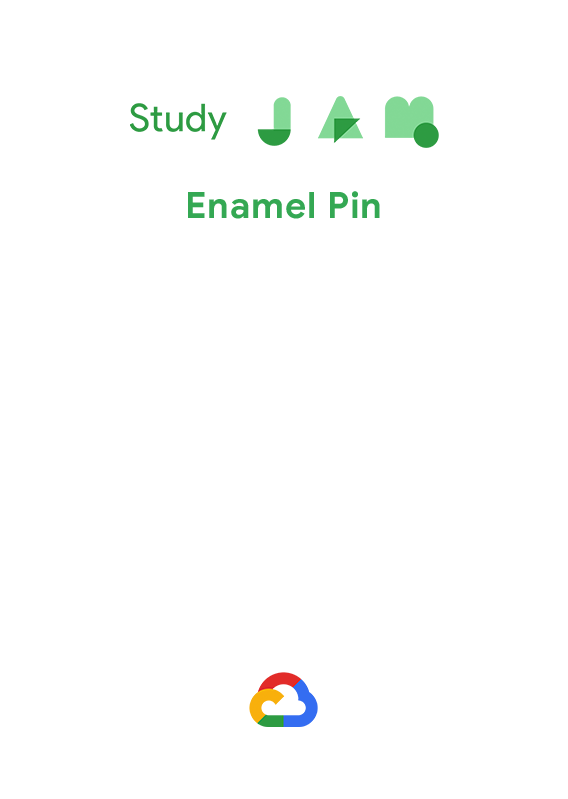
<style>
.page{position:relative;width:568px;height:799px;background:#ffffff}
.page>*{position:absolute;margin:0}
.t1{font:36.2px "GoogleSans-Bold";letter-spacing:0.025em;color:#34a853}
</style>
<div class="page">
<p class="t1" style="left:188px;top:191px;width:192px;height:28px">Enamel Pin</p>
</div>
